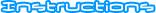
<style>
.page{position:relative;width:156px;height:13px;background:#0096ff}
.page>*{position:absolute;margin:0}
.t1{font:16px "ThundergodII";color:#ffffff}
</style>
<div class="page">
<p class="t1" style="left:2px;top:2px;width:152px;height:9px">Instructions</p>
</div>
